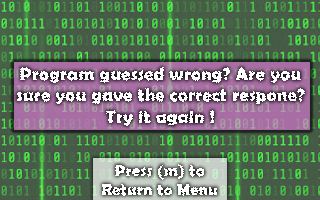
<style>
.page{position:relative;width:320px;height:200px}
.page>*{position:absolute;margin:0}
.t1{font:18px "BerlinSansFBDemi-Bold";letter-spacing:0.025em;color:#ffffff}
.t2{font:16px "BerlinSansFBDemi-Bold";letter-spacing:0.025em;color:#ffffff}
</style>
<div class="page">
<p class="t1" style="left:16px;top:67px;width:289px;height:59px;text-align:center">Program guessed wrong? Are you sure you gave the correct respone? Try it again !</p>
<p class="t2" style="left:102px;top:164px;width:115px;height:32px;text-align:center">Press (m) to<br>Return to Menu</p>
</div>
